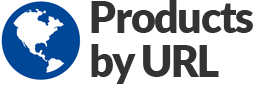
<style>
.page{position:relative;width:262px;height:85px;background:#ffffff}
.page>*{position:absolute;margin:0}
.t1{font:43px/43.2px "Lato-Black";letter-spacing:-0.04em;color:#333333}
</style>
<div class="page">
<p class="t1" style="left:91px;top:0px;width:162px;height:84px">Products<br>by URL</p>
</div>
